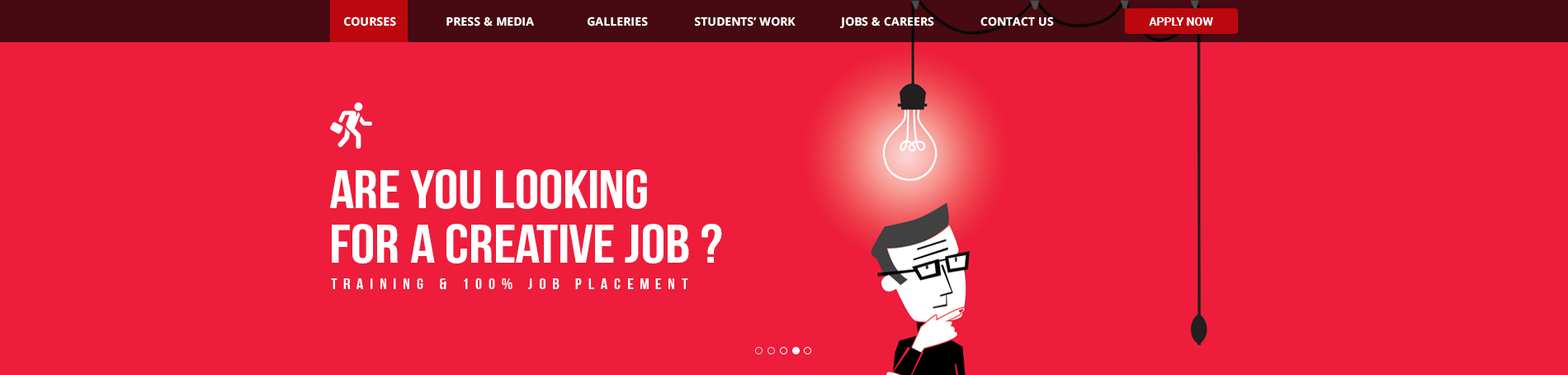
<style>
.page{position:relative;width:1568px;height:375px;background:#ed1d3b}
.page>*{position:absolute;margin:0}
.t1{font:11.6px "OpenSans-Bold";color:#ffffff}
.t2{font:11.6px "Roboto-Bold";color:#ffffff}
.t3{font:11.6px "OpenSans-Bold";color:#b1b1b1}
.t4{font:53.9px/54.6px "BebasNeue";color:#ffffff;text-transform:uppercase;scale:1.13 1}
.t5{font:15px "BebasNeue";letter-spacing:0.38em;color:#ffffff;scale:1.14 1}
</style>
<div class="page">
<p class="t1" style="left:343px;top:17px;width:711px;height:12px">COURSES               PRESS &amp; MEDIA                GALLERIES              STUDENTS’ WORK              JOBS &amp; CAREERS              CONTACT US</p>
<p class="t2" style="left:1149px;top:17px;width:64px;height:9px"><span class="t3"> </span>APPLY NOW</p>
<p class="t4" style="left:330px;top:169px;width:392px;height:94px">Are you looking<br>for a creative job ?</p>
<p class="t5" style="left:331px;top:278px;width:357px;height:11px">training &amp; 100% job placement</p>
</div>
